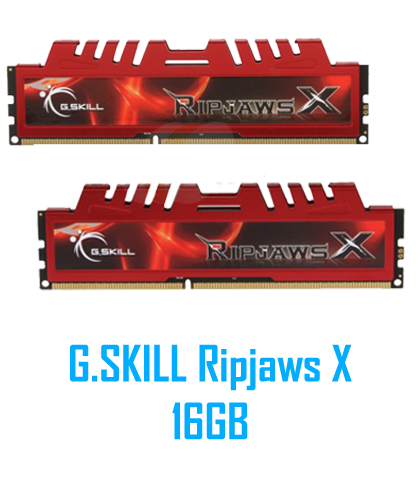
<style>
.page{position:relative;width:420px;height:500px;background:#ffffff}
.page>*{position:absolute;margin:0}
.t1{font:48px "AgencyFB-Bold";color:#02acfe}
</style>
<div class="page">
<p class="t1" style="left:70px;top:344px;width:282px;height:96px;text-align:center">G.SKILL Ripjaws X <br>16GB</p>
</div>
